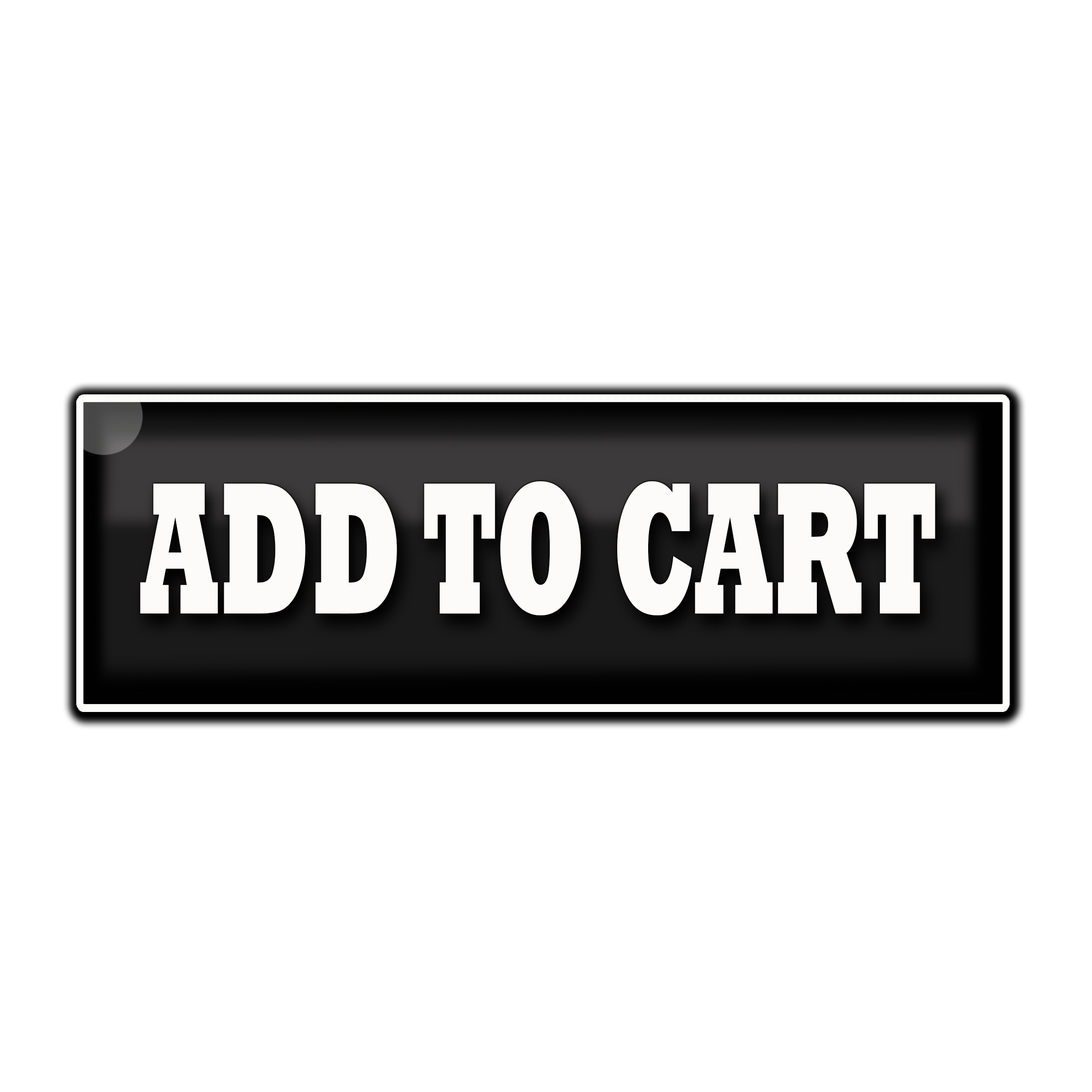
<style>
.page{position:relative;width:1092px;height:1092px;background:#ffffff}
.page>*{position:absolute;margin:0}
.t1{font:190.8px "Rockwell-ExtraBold";color:#fdfafa;scale:0.55 1}
</style>
<div class="page">
<p class="t1" style="left:140px;top:481px;width:795px;height:134px">ADD TO CART</p>
</div>
